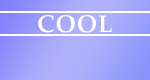
<style>
.page{position:relative;width:150px;height:80px}
.page>*{position:absolute;margin:0}
.t1{font:24px "PalatinoLinotype-Bold";letter-spacing:0.05em;color:#ffffff}
</style>
<div class="page">
<p class="t1" style="left:38px;top:15px;width:74px;height:18px">COOL</p>
</div>
